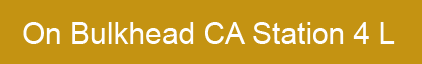
<style>
.page{position:relative;width:422px;height:64px;background:#c49312}
.page>*{position:absolute;margin:0}
.t1{font:30px "ArialMT";color:#fefefe}
</style>
<div class="page">
<p class="t1" style="left:23px;top:22px;width:372px;height:22px">On Bulkhead CA Station 4 L</p>
</div>
